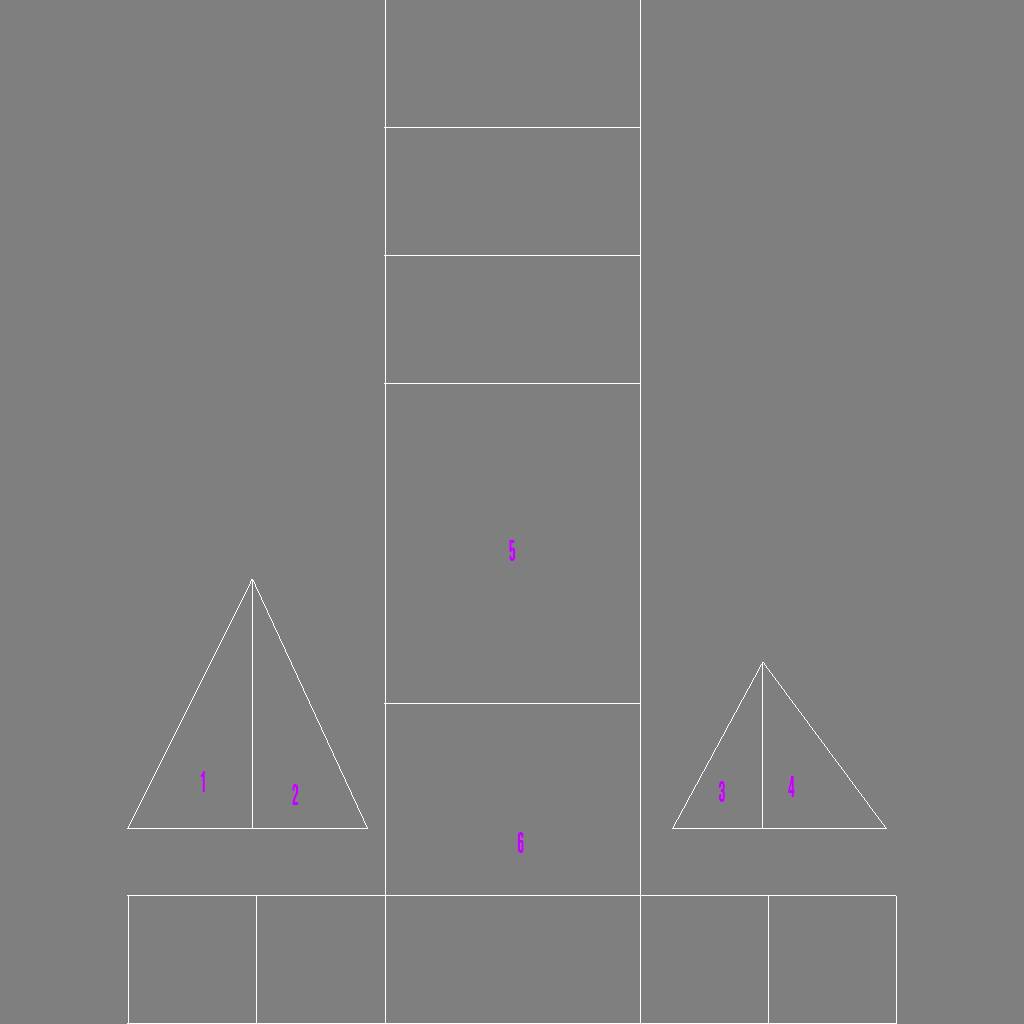
<style>
.page{position:relative;width:1024px;height:1024px;background:#7f7f7f}
.page>*{position:absolute;margin:0}
.t1{font:30px "Franchise-Bold";letter-spacing:-0.03em;color:#c600ff;scale:0.67 1}
</style>
<div class="page">
<p class="t1" style="left:509px;top:540px;width:7px;height:21px">5</p>
<p class="t1" style="left:200px;top:771px;width:5px;height:21px">1</p>
<p class="t1" style="left:292px;top:784px;width:7px;height:21px">2</p>
<p class="t1" style="left:719px;top:781px;width:6px;height:21px">3</p>
<p class="t1" style="left:788px;top:776px;width:7px;height:21px">4</p>
<p class="t1" style="left:517px;top:832px;width:7px;height:21px">6</p>
</div>
